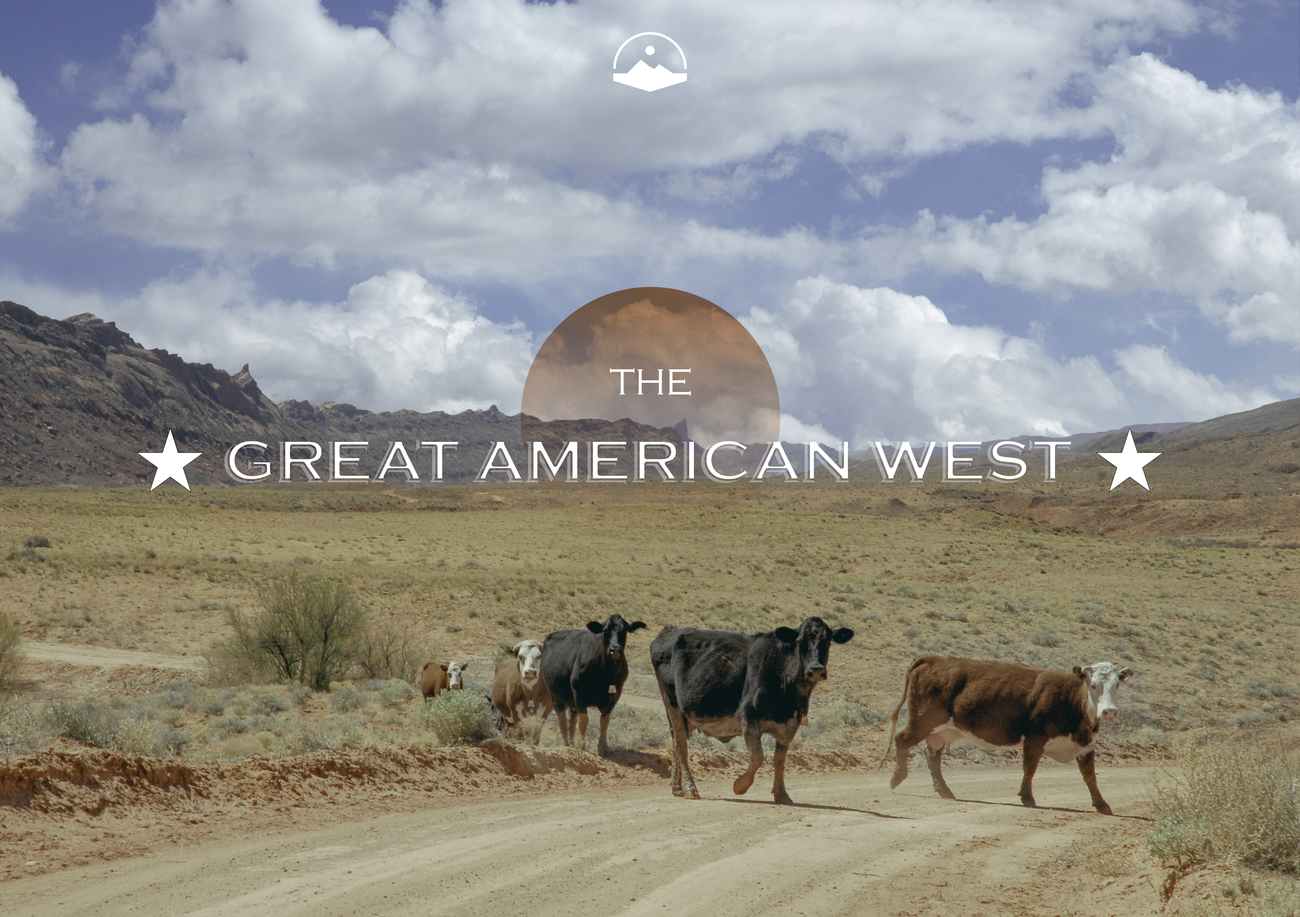
<style>
.page{position:relative;width:1300px;height:917px}
.page>*{position:absolute;margin:0}
.t1{font:37.8px "CopperplateGothic-Light";color:#ffffff}
.t2{font:61.4px "CopperplateGothic-Bold"}
</style>
<div class="page">
<p class="t1" style="left:610px;top:368px;width:81px;height:28px">THE</p>
<p class="t2" style="left:227px;top:438px;width:846px;height:44px">GREAT AMERICAN WEST</p>
</div>
